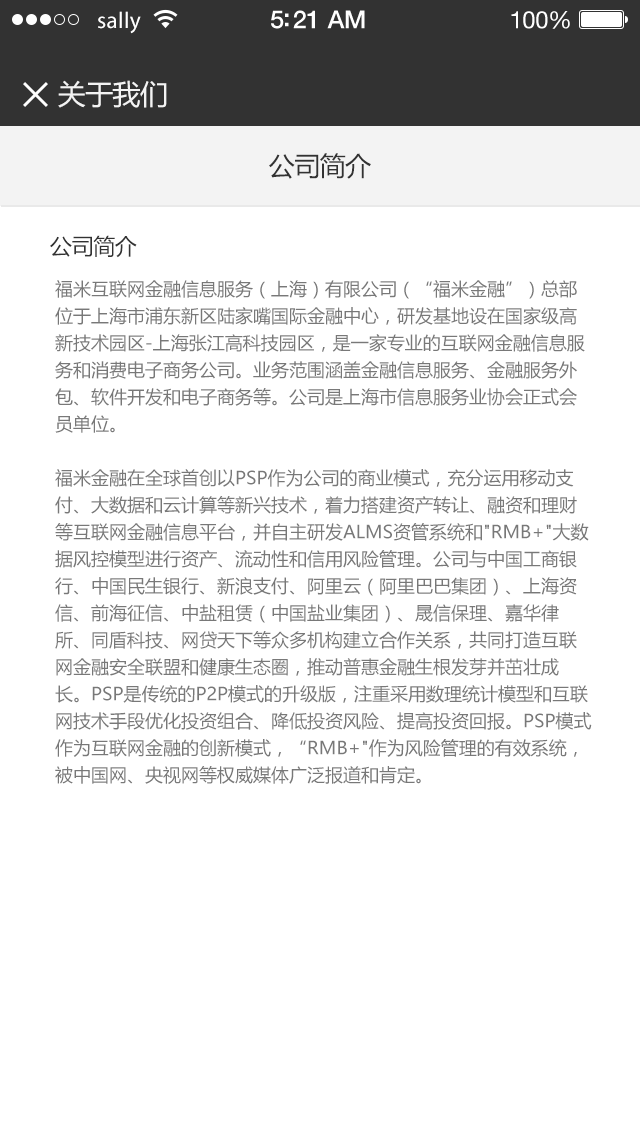
<style>
.page{position:relative;width:640px;height:1136px;background:#ffffff}
.page>*{position:absolute;margin:0}
.t1{font:23px "MyriadPro-Regular";letter-spacing:0.02em;color:#ffffff}
.t2{font:25px "HelveticaNeue-Medium";letter-spacing:-0.02em;color:#ffffff}
.t3{font:24px "HelveticaNeue";letter-spacing:-0.02em;color:#ffffff}
.t4{font:28px "MicrosoftYaHei";letter-spacing:-0.02em;color:#f3f3f3}
.t5{font:26px "MicrosoftYaHei";letter-spacing:-0.02em;color:#323232}
.t6{font:22px "MicrosoftYaHei";letter-spacing:-0.02em;color:#323232}
.t7{font:18px/27px "MicrosoftYaHei";color:#787878}
</style>
<div class="page">
<p class="t1" style="left:98px;top:11px;width:43px;height:23px">sally</p>
<p class="t2" style="left:271px;top:10px;width:94px;height:19px">5:21 AM</p>
<p class="t3" style="left:511px;top:11px;width:59px;height:18px">100%</p>
<p class="t4" style="left:58px;top:80px;width:109px;height:28px">关于我们</p>
<p class="t5" style="left:269px;top:153px;width:102px;height:26px">公司简介</p>
<p class="t6" style="left:50px;top:235px;width:87px;height:23px">公司简介</p>
<p class="t7" style="left:55px;top:280px;width:537px;height:504px">福米互联网金融信息服务（上海）有限公司（“福米金融”）总部位于上海市浦东新区陆家嘴国际金融中心，研发基地设在国家级高新技术园区-上海张江高科技园区，是一家专业的互联网金融信息服务和消费电子商务公司。业务范围涵盖金融信息服务、金融服务外包、软件开发和电子商务等。公司是上海市信息服务业协会正式会员单位。<br><br>福米金融在全球首创以PSP作为公司的商业模式，充分运用移动支付、大数据和云计算等新兴技术，着力搭建资产转让、融资和理财等互联网金融信息平台，并自主研发ALMS资管系统和"RMB+"大数据风控模型进行资产、流动性和信用风险管理。公司与中国工商银行、中国民生银行、新浪支付、阿里云（阿里巴巴集团）、上海资信、前海征信、中盐租赁（中国盐业集团）、晟信保理、嘉华律所、同盾科技、网贷天下等众多机构建立合作关系，共同打造互联网金融安全联盟和健康生态圈，推动普惠金融生根发芽并茁壮成长。PSP是传统的P2P模式的升级版，注重采用数理统计模型和互联网技术手段优化投资组合、降低投资风险、提高投资回报。PSP模式作为互联网金融的创新模式，“RMB+"作为风险管理的有效系统，被中国网、央视网等权威媒体广泛报道和肯定。</p>
</div>
